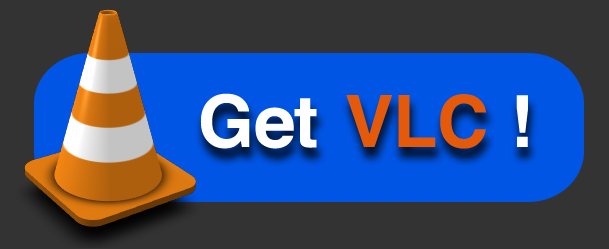
<style>
.page{position:relative;width:609px;height:249px;background:#333333}
.page>*{position:absolute;margin:0}
.t1{font:72px "Helvetica-Bold";color:#ffffff}
.t2{font:72px "Helvetica-Bold";color:#e45a0a}
</style>
<div class="page">
<p class="t1" style="left:200px;top:93px;width:117px;height:56px">Get</p>
<p class="t2" style="left:346px;top:94px;width:140px;height:55px">VLC</p>
<p class="t1" style="left:516px;top:95px;width:12px;height:52px">!</p>
</div>
